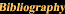
<style>
.page{position:relative;width:65px;height:14px;background:#000000}
.page>*{position:absolute;margin:0}
.t1{font:12px "TimesNewRomanPS-BoldMT";color:#fec45f;font-style:italic}
</style>
<div class="page">
<p class="t1" style="left:0px;top:2px;width:66px;height:12px">Bibliography</p>
</div>
